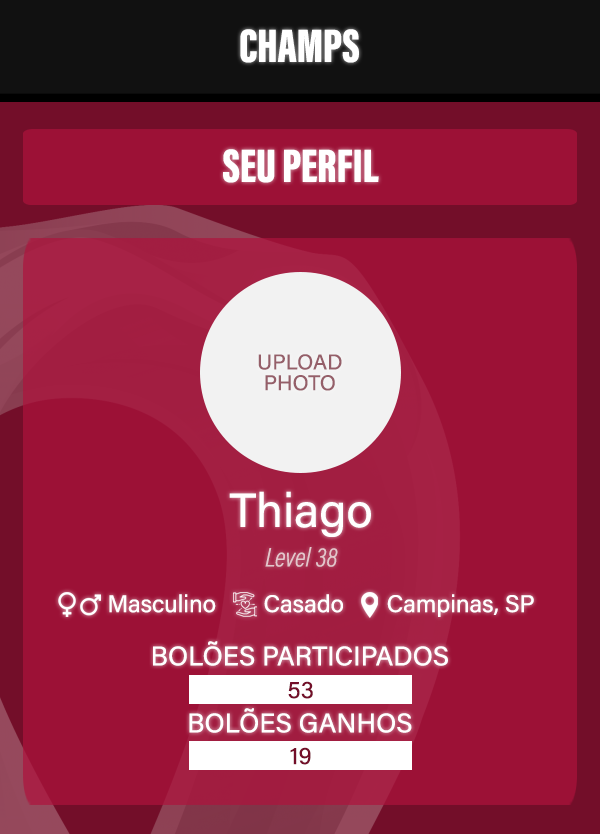
<style>
.page{position:relative;width:600px;height:834px;background:#9c1136}
.page>*{position:absolute;margin:0}
.t1{font:48.2px "AcuminConcept-ExtraCondensedBlack";color:#ffffff}
.t2{font:21.4px/20.8px "AcuminConcept-Regular";color:#955f69}
.t3{font:47.8px "AcuminConcept-Regular";color:#ffffff}
.t4{font:27px "AcuminConcept-CondensedLightItalic";color:#e3c6cc}
.t5{font:24.2px "AcuminConcept-Regular";color:#ffffff}
.t6{font:26.9px "AcuminConcept-Regular";color:#ffffff}
.t7{font:24.2px "AcuminConcept-Regular";color:#730e29}
</style>
<div class="page">
<p class="t1" style="left:240px;top:29px;width:119px;height:34px">CHAMPS</p>
<p class="t1" style="left:223px;top:149px;width:156px;height:34px">SEU PERFIL</p>
<p class="t2" style="left:258px;top:354px;width:84px;height:37px;text-align:center">UPLOAD<br>PHOTO</p>
<p class="t3" style="left:229px;top:491px;width:142px;height:46px">Thiago</p>
<p class="t4" style="left:265px;top:547px;width:73px;height:20px">Level 38</p>
<p class="t5" style="left:109px;top:594px;width:107px;height:19px">Masculino</p>
<p class="t5" style="left:264px;top:594px;width:79px;height:19px">Casado</p>
<p class="t5" style="left:387px;top:594px;width:147px;height:23px">Campinas, SP</p>
<p class="t6" style="left:153px;top:641px;width:295px;height:25px">BOLÕES PARTICIPADOS</p>
<p class="t7" style="left:288px;top:681px;width:25px;height:18px">53</p>
<p class="t6" style="left:189px;top:708px;width:223px;height:25px">BOLÕES GANHOS</p>
<p class="t7" style="left:290px;top:747px;width:21px;height:18px">19</p>
</div>
